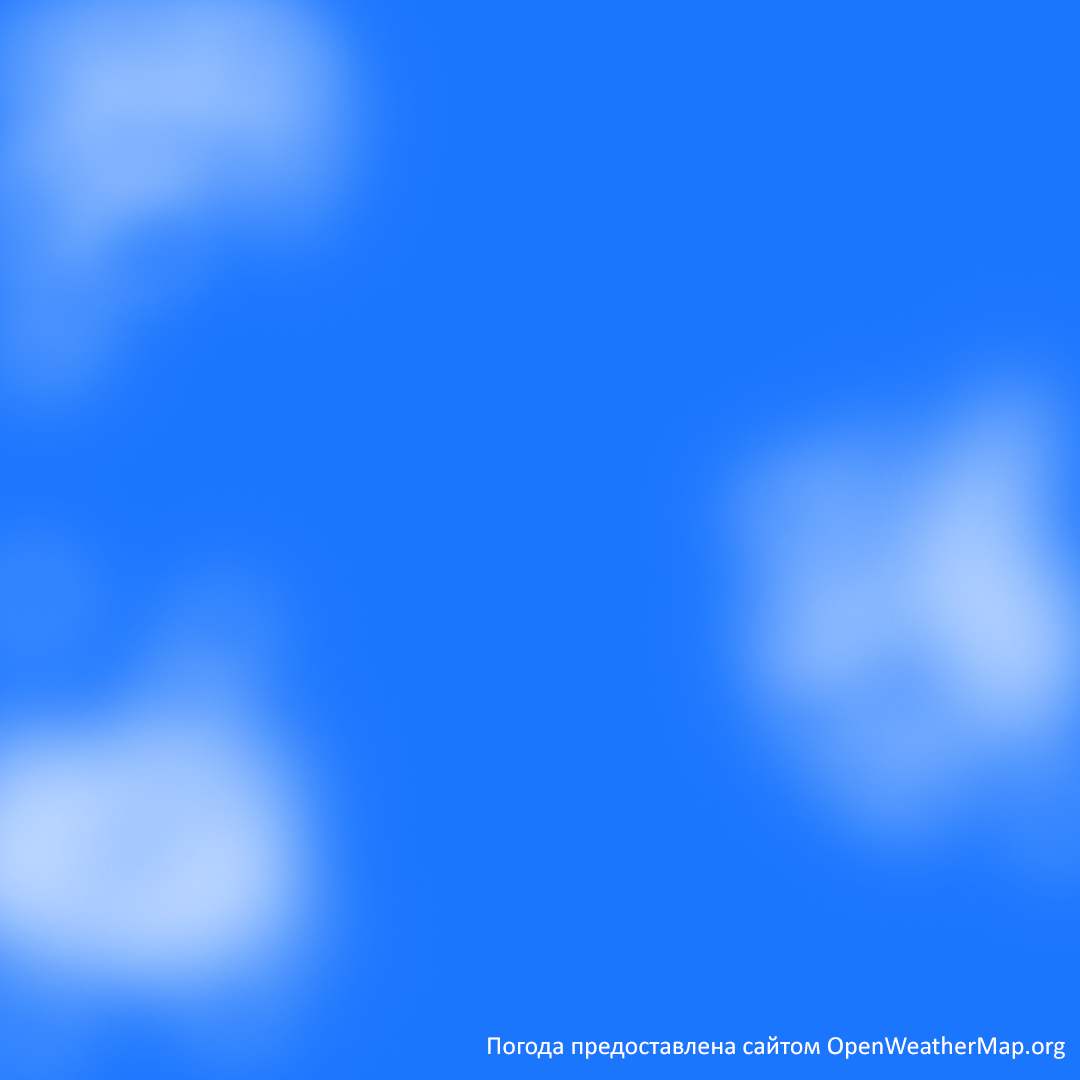
<style>
.page{position:relative;width:1080px;height:1080px;background:#1b76fe}
.page>*{position:absolute;margin:0}
.t1{font:26px "Calibri";color:#ffffff}
</style>
<div class="page">
<p class="t1" style="left:488px;top:1036px;width:577px;height:23px">Погода предоставлена сайтом OpenWeatherMap.org</p>
</div>
